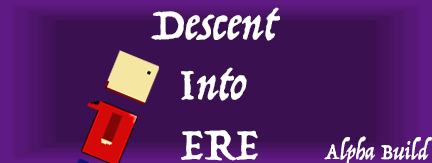
<style>
.page{position:relative;width:432px;height:163px;background:#3b1050}
.page>*{position:absolute;margin:0}
.t1{font:50px "Trattatello";color:#ffffff}
</style>
<div class="page">
<p class="t1" style="left:151px;top:7px;width:129px;height:154px;text-align:center">Descent <br>Into <br>ERE</p>
</div>
